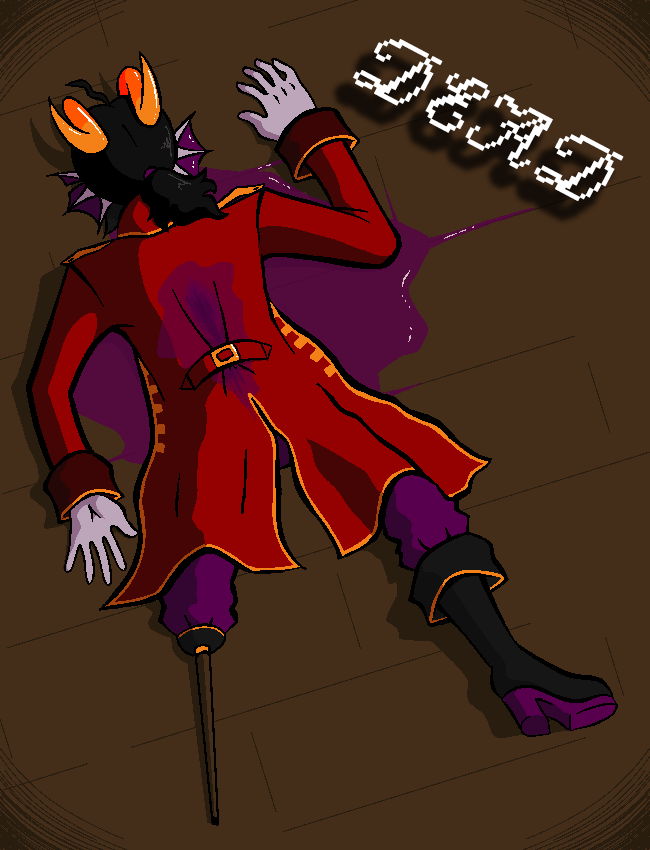
<style>
.page{position:relative;width:650px;height:850px;background:#442d19}
.page>*{position:absolute;margin:0}
.t1{font:86.2px "Retrogression-Regular";color:#ffffff}
</style>
<div class="page">
<p class="t1" style="left:353px;top:38px;width:271px;height:163px;rotate:28deg">DEAD</p>
</div>
